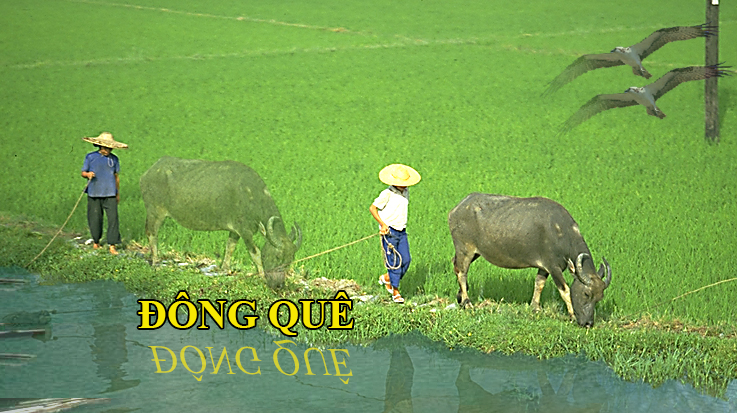
<style>
.page{position:relative;width:737px;height:413px}
.page>*{position:absolute;margin:0}
.t1{font:40px "TimesNewRomanPS-BoldMT";color:#f6e803}
.t2{font:40px "TimesNewRomanPS-ItalicMT";color:#d2d034}
</style>
<div class="page">
<p class="t1" style="left:138px;top:292px;width:215px;height:43px">ĐỒNG QUÊ</p>
<p class="t2" style="left:148px;top:339px;width:205px;height:45px;rotate:1deg">ĐỒNG QUÊ</p>
</div>
